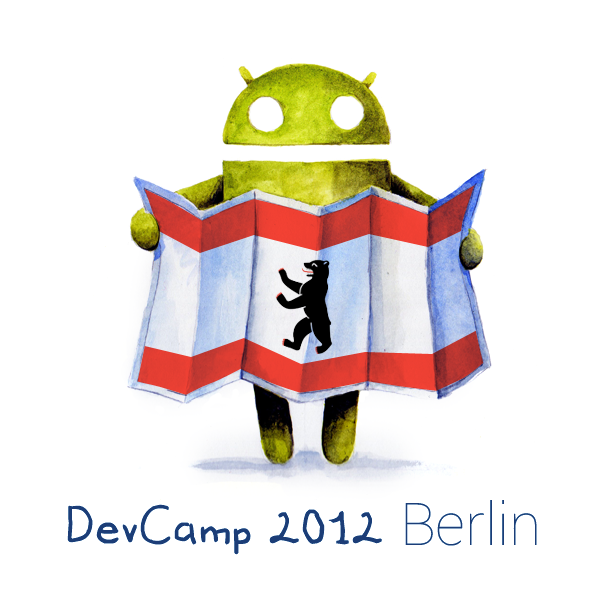
<style>
.page{position:relative;width:608px;height:608px;background:#ffffff}
.page>*{position:absolute;margin:0}
.t1{font:59px "EliasPfotenschrift45";color:#1c3d77}
.t2{font:59px "Roboto-Thin";color:#1c3d77}
</style>
<div class="page">
<p class="t1" style="left:67px;top:499px;width:470px;height:56px">DevCamp 2012 <span class="t2">Berlin</span></p>
</div>
